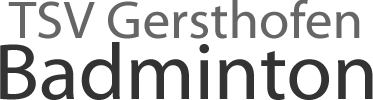
<style>
.page{position:relative;width:373px;height:100px;background:#ffffff}
.page>*{position:absolute;margin:0}
.t1{font:53.3px "MyriadWebPro";color:#666666}
.t2{font:80px "MyriadWebPro";color:#333333}
</style>
<div class="page">
<p class="t1" style="left:8px;top:0px;width:352px;height:39px">TSV Gersthofen</p>
<p class="t2" style="left:0px;top:42px;width:373px;height:58px">Badminton</p>
</div>
